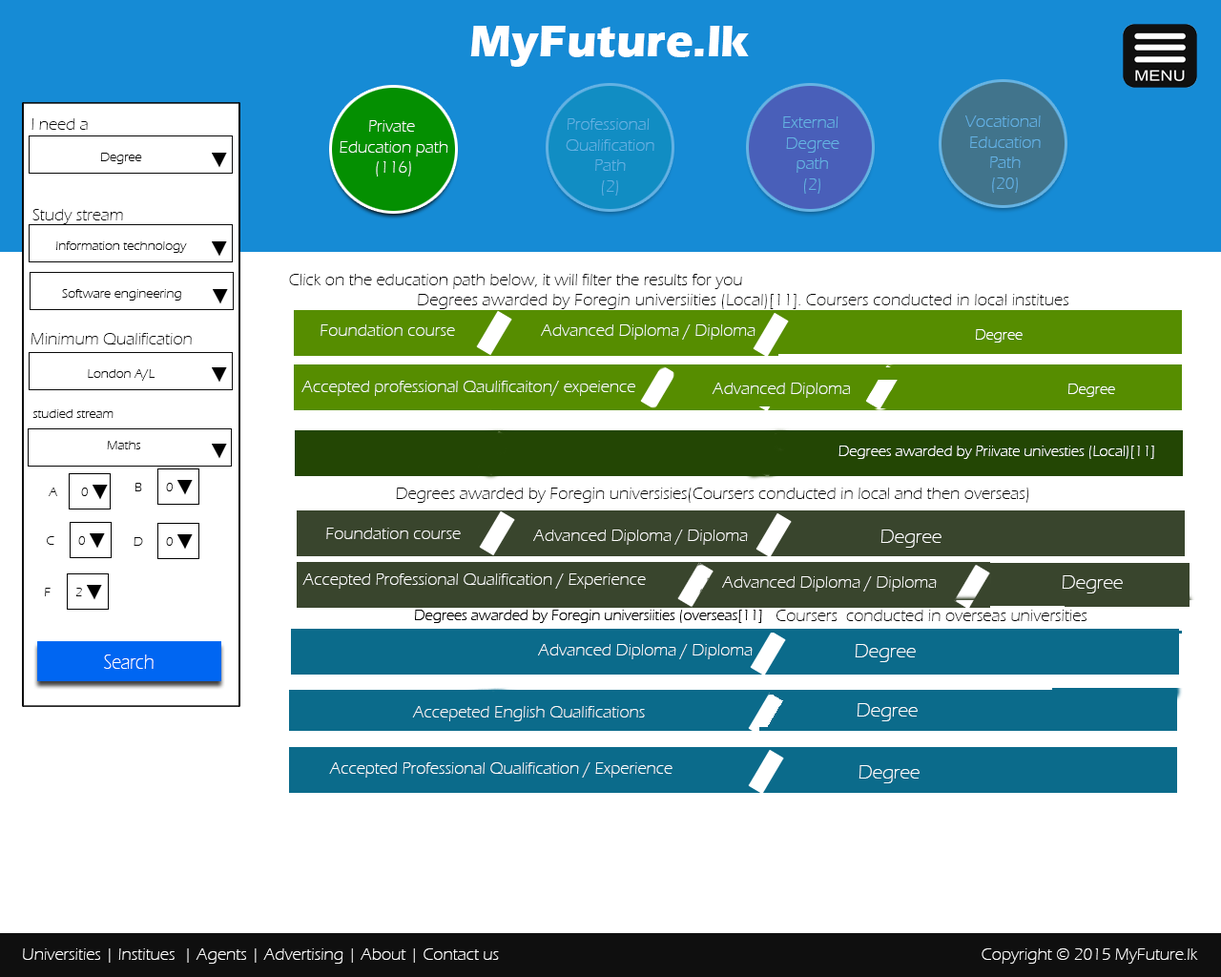
<style>
.page{position:relative;width:1221px;height:977px;background:#ffffff}
.page>*{position:absolute;margin:0}
.t1{font:45.8px "ErasITC-Bold";color:#ffffff}
.t2{font:17.2px "ErasITC-Light";color:#090909}
.t3{font:17.2px "ErasITC-Light";color:#fffefe}
.t4{font:17.2px "ErasITC-Light";color:#63b1e3}
.t5{font:17.2px "ErasITC-Light";color:#65b2e3}
.t6{font:13.4px "ErasITC-Light";color:#090909}
.t7{font:17.2px "ErasITC-Light";color:#000000}
.t8{font:15px "ErasITC-Light";color:#fffefe}
.t9{font:19.7px "ErasITC-Light";color:#ffffff}
.t10{font:17.2px "ErasITC-Light";color:#ffffff}
.t11{font:21.6px "ErasITC-Light";color:#ffffff;scale:0.83 1}
.t12{font:17.2px "ErasITC-Light";color:#fbfbfb}
</style>
<div class="page">
<p class="t1" style="left:470px;top:26px;width:279px;height:41px">MyFuture.lk</p>
<p class="t2" style="left:31px;top:118px;width:57px;height:12px">I need a</p>
<p class="t3" style="left:340px;top:120px;width:108px;height:56px;text-align:center">Private <br>Education path<br>(116)</p>
<p class="t4" style="left:566px;top:118px;width:88px;height:78px;text-align:center">Professional <br>Qualification<br>Path<br>(2)</p>
<p class="t5" style="left:783px;top:116px;width:56px;height:78px;text-align:center">External <br>Degree<br>path<br>(2)</p>
<p class="t5" style="left:965px;top:115px;width:76px;height:78px;text-align:center">Vocational <br>Education<br>Path<br>(20)</p>
<p class="t6" style="left:100px;top:153px;width:42px;height:11px">Degree</p>
<p class="t2" style="left:32px;top:209px;width:91px;height:15px">Study stream</p>
<p class="t6" style="left:56px;top:241px;width:131px;height:12px">Information technology</p>
<p class="t7" style="left:289px;top:274px;width:453px;height:15px">Click on the education path below, it will filter the results for you</p>
<p class="t6" style="left:62px;top:289px;width:119px;height:11px">Software engineering</p>
<p class="t7" style="left:418px;top:294px;width:650px;height:15px">Degrees awarded by Foregin universiities (Local)[11]. Coursers conducted in local institues</p>
<p class="t3" style="left:320px;top:324px;width:135px;height:12px">Foundation course</p>
<p class="t3" style="left:541px;top:324px;width:214px;height:16px">Advanced Diploma / Diploma</p>
<p class="t8" style="left:976px;top:329px;width:46px;height:13px">Degree</p>
<p class="t2" style="left:31px;top:333px;width:161px;height:11px">Minimum Qualification</p>
<p class="t6" style="left:88px;top:369px;width:67px;height:12px">London A/L</p>
<p class="t3" style="left:301px;top:381px;width:334px;height:15px">Accepted professional Qaulificaiton/ expeience</p>
<p class="t3" style="left:712px;top:382px;width:138px;height:16px">Advanced Diploma</p>
<p class="t8" style="left:1068px;top:383px;width:47px;height:14px">Degree</p>
<p class="t6" style="left:32px;top:409px;width:82px;height:9px">studied stream</p>
<p class="t6" style="left:107px;top:441px;width:33px;height:8px">Maths</p>
<p class="t8" style="left:838px;top:445px;width:316px;height:14px">Degrees awarded by Priivate univesties (Local)[11]</p>
<p class="t6" style="left:134px;top:483px;width:8px;height:8px">B</p>
<p class="t6" style="left:166px;top:483px;width:7px;height:8px">0</p>
<p class="t6" style="left:49px;top:487px;width:8px;height:9px">A</p>
<p class="t6" style="left:81px;top:487px;width:7px;height:9px">0</p>
<p class="t7" style="left:396px;top:487px;width:633px;height:16px">Degrees awarded by Foregin universisies(Coursers conducted in local and then overseas)</p>
<p class="t3" style="left:326px;top:527px;width:135px;height:12px">Foundation course</p>
<p class="t3" style="left:533px;top:529px;width:215px;height:16px">Advanced Diploma / Diploma</p>
<p class="t9" style="left:880px;top:529px;width:61px;height:18px">Degree</p>
<p class="t6" style="left:47px;top:536px;width:7px;height:9px">C</p>
<p class="t6" style="left:78px;top:536px;width:7px;height:9px">0</p>
<p class="t6" style="left:134px;top:537px;width:9px;height:9px">D</p>
<p class="t6" style="left:166px;top:537px;width:7px;height:9px">0</p>
<p class="t10" style="left:302px;top:573px;width:344px;height:16px">Accepted Professional Qualification / Experience</p>
<p class="t3" style="left:722px;top:576px;width:215px;height:15px">Advanced Diploma / Diploma</p>
<p class="t9" style="left:1062px;top:575px;width:61px;height:18px">Degree</p>
<p class="t6" style="left:45px;top:588px;width:6px;height:8px">F</p>
<p class="t6" style="left:75px;top:588px;width:7px;height:8px">2</p>
<p class="t7" style="left:776px;top:609px;width:310px;height:12px">Coursers  conducted in overseas universities</p>
<p class="t3" style="left:538px;top:644px;width:215px;height:15px">Advanced Diploma / Diploma</p>
<p class="t9" style="left:855px;top:644px;width:61px;height:18px">Degree</p>
<p class="t11" style="left:104px;top:654px;width:50px;height:15px">Search</p>
<p class="t12" style="left:412px;top:706px;width:233px;height:15px">Accepeted English Qualifications</p>
<p class="t9" style="left:857px;top:703px;width:61px;height:18px">Degree</p>
<p class="t10" style="left:329px;top:762px;width:343px;height:15px">Accepted Professional Qualification / Experience</p>
<p class="t9" style="left:858px;top:765px;width:61px;height:18px">Degree</p>
<p class="t10" style="left:23px;top:948px;width:476px;height:15px">Universities | Institues  | Agents | Advertising | About | Contact us</p>
<p class="t10" style="left:981px;top:948px;width:217px;height:15px">Copyright © 2015 MyFuture.lk</p>
</div>
